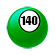
<style>
.page{position:relative;width:55px;height:55px;background:#ffffff}
.page>*{position:absolute;margin:0}
.t1{font:12px "Impact";color:#000000}
</style>
<div class="page">
<p class="t1" style="left:21px;top:16px;width:17px;height:9px">140</p>
</div>
